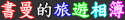
<style>
.page{position:relative;width:125px;height:20px;background:#333333}
.page>*{position:absolute;margin:0}
.t1{font:18px "DFKaiShu-SB-Estd-BF";color:#ffffff}
</style>
<div class="page">
<p class="t1" style="left:1px;top:1px;width:15px;height:18px">書</p>
<p class="t1" style="left:19px;top:1px;width:15px;height:18px">曼</p>
<p class="t1" style="left:37px;top:2px;width:15px;height:16px">的</p>
<p class="t1" style="left:54px;top:2px;width:17px;height:15px">旅</p>
<p class="t1" style="left:72px;top:2px;width:17px;height:16px">遊</p>
<p class="t1" style="left:91px;top:2px;width:15px;height:16px">相</p>
<p class="t1" style="left:109px;top:1px;width:15px;height:17px">簿</p>
</div>
